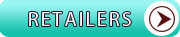
<style>
.page{position:relative;width:180px;height:37px}
.page>*{position:absolute;margin:0}
.t1{font:20px "MyriadPro-Regular";letter-spacing:0.1em;color:#fdfdfd}
</style>
<div class="page">
<p class="t1" style="left:29px;top:12px;width:102px;height:14px">RETAILERS</p>
</div>
